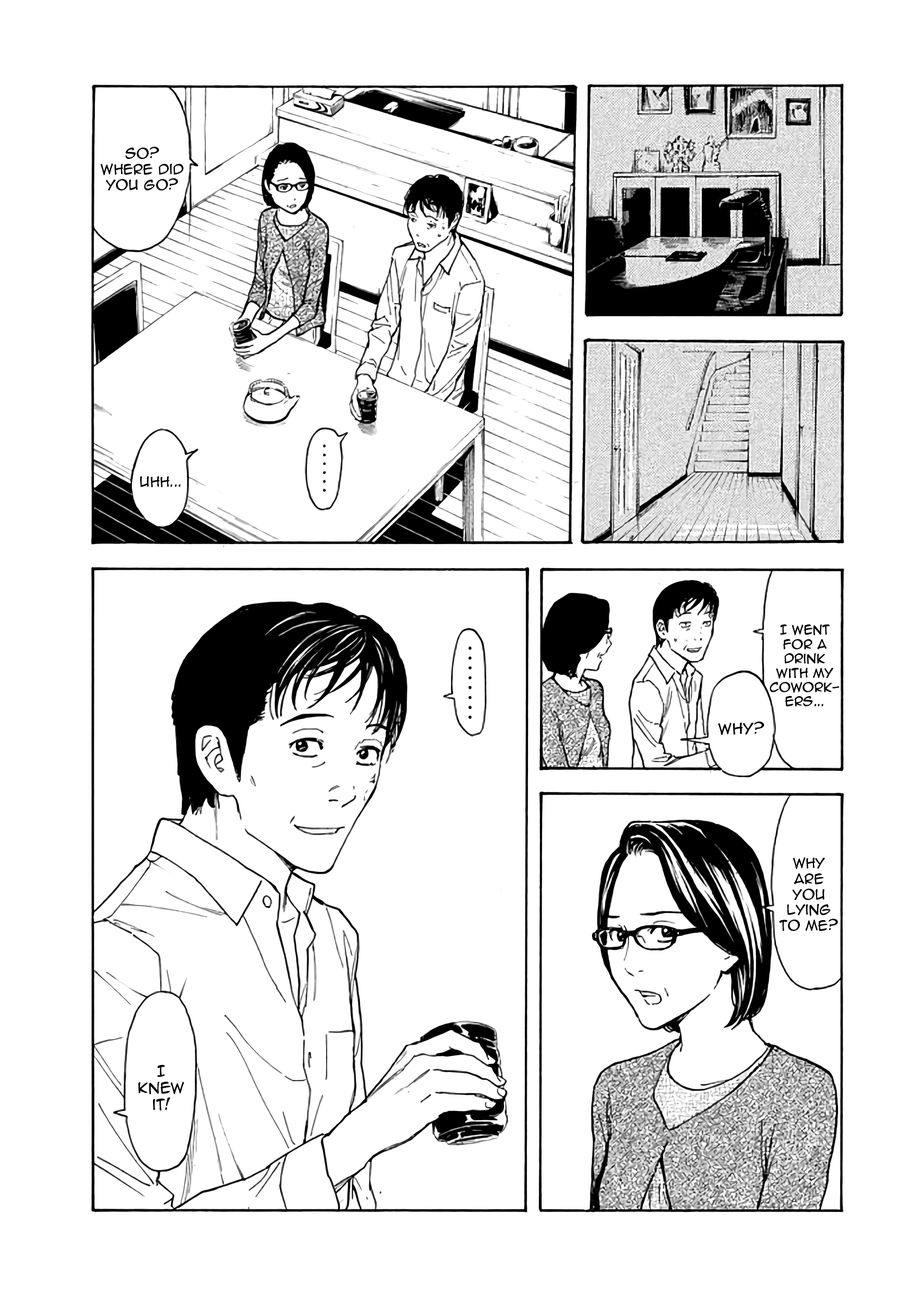
<style>
.page{position:relative;width:916px;height:1302px;background:#ffffff}
.page>*{position:absolute;margin:0}
.t1{font:13px "AnimeAce2.0BB";color:#000000}
.t2{font:11.9px "AnimeAce2.0BB";color:#000000}
.t3{font:14.1px "AnimeAce2.0BB";color:#000000}
</style>
<div class="page">
<p class="t1" style="left:100px;top:146px;width:83px;height:44px;text-align:center">so? Where did you go?</p>
<p class="t1" style="left:140px;top:476px;width:41px;height:11px">uhh...</p>
<p class="t2" style="left:769px;top:624px;width:70px;height:82px;text-align:center">I went for a drink with my coworkers...</p>
<p class="t3" style="left:718px;top:722px;width:46px;height:13px">Why?</p>
<p class="t1" style="left:779px;top:857px;width:59px;height:74px;text-align:center">Why are you lying to me?</p>
<p class="t3" style="left:138px;top:1065px;width:46px;height:46px;text-align:center">I knew it!</p>
</div>
